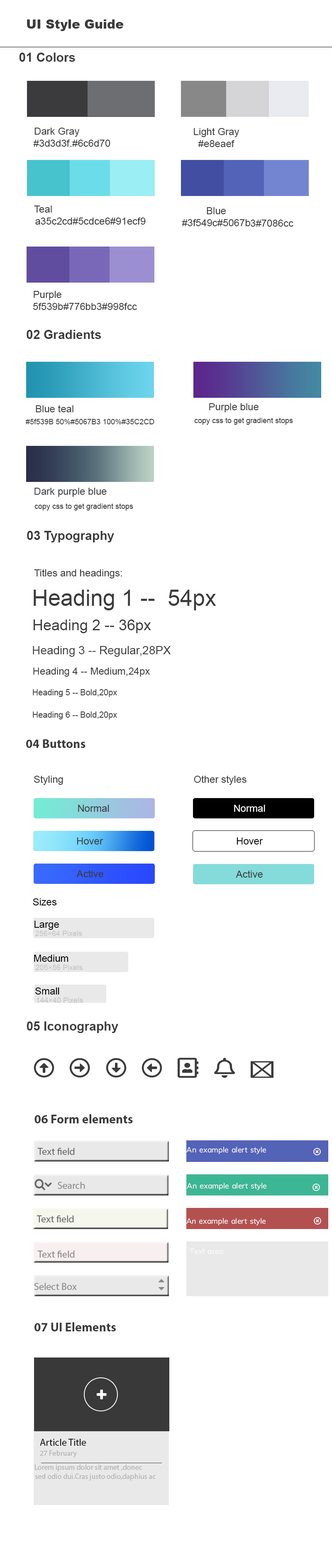
<style>
.page{position:relative;width:332px;height:1568px;background:#ffffff}
.page>*{position:absolute;margin:0}
.t1{font:12.4px "Arial-Black";color:#3b3b3d}
.t2{font:9.9px "ArialMT";color:#3b3b3d}
.t3{font:12.4px "Arial-BoldMT";color:#3b3b3d}
.t4{font:7.5px "ArialMT";color:#3b3b3d}
.t5{font:22.4px "ArialMT";color:#3b3b3d}
.t6{font:14.9px "ArialMT";color:#3b3b3d}
.t7{font:11.6px "ArialMT";color:#3b3b3d}
.t8{font:8.3px "ArialMT";color:#3b3b3d}
.t9{font:12.4px "MyriadPro-Bold";color:#3b3b3d}
.t10{font:12.4px "FontAwesome5Free-Regular";color:#3b3b3d}
.t11{font:9.9px "ArialMT";color:#ffffff}
.t12{font:9.9px "ArialMT";color:#000000}
.t13{font:7.5px "ArialMT";color:#c5c5c5}
.t14{font:9.9px "ArialMT";color:#c5c5c5}
.t15{font:12.4px "MyriadPro-Regular";color:#3b3b3d}
.t16{font:9.9px "MyriadPro-Regular";color:#686666}
.t17{font:9.9px "MyriadPro-Regular";color:#8b8989}
.t18{font:9.9px "MyriadPro-Regular";color:#181818}
.t19{font:7.5px "MyriadPro-Regular";color:#b5b1b1}
.t20{font:9.9px "MyriadPro-Regular";color:#b5b1b1}
</style>
<div class="page">
<p class="t1" style="left:27px;top:19px;width:96px;height:12px"><span class="t2">                       </span>UI Style Guide</p>
<p class="t3" style="left:19px;top:53px;width:56px;height:9px">01 Colors</p>
<p class="t2" style="left:33px;top:128px;width:77px;height:19px;text-align:center">Dark Gray<br>                            #3d3d3f.#6c6d70</p>
<p class="t2" style="left:194px;top:128px;width:45px;height:19px;text-align:center">Light Gray<br>#e8eaef</p>
<p class="t2" style="left:34px;top:206px;width:111px;height:19px;text-align:center">Teal<br>                                         a35c2cd#5cdce6#91ecf9</p>
<p class="t2" style="left:181px;top:207px;width:69px;height:19px;text-align:center">Blue<br>#3f549c#5067b</p>
<p class="t2" style="left:250px;top:220px;width:43px;height:7px">3#7086cc</p>
<p class="t2" style="left:33px;top:291px;width:104px;height:19px;text-align:center">Purple<br>                                     5f539b#776bb3#998fcc</p>
<p class="t3" style="left:27px;top:330px;width:74px;height:9px"><span class="t2">                     </span>02 Gradients</p>
<p class="t2" style="left:209px;top:403px;width:49px;height:9px"><span class="t3">                   </span>Purple blue</p>
<p class="t4" style="left:194px;top:418px;width:99px;height:7px">copy css to get gradient stops</p>
<p class="t2" style="left:34px;top:488px;width:72px;height:9px"><span class="t4">                               </span>Dark purple blue</p>
<p class="t4" style="left:34px;top:503px;width:99px;height:8px">copy css to get gradient stops</p>
<p class="t3" style="left:27px;top:531px;width:87px;height:11px"><span class="t2">                                </span>03 Typography</p>
<p class="t2" style="left:34px;top:569px;width:88px;height:9px">Titles and headings:</p>
<p class="t5" style="left:34px;top:590px;width:182px;height:20px"><span class="t2">                          </span>Heading 1 --  54px</p>
<p class="t6" style="left:34px;top:619px;width:117px;height:14px">Heading 2 -- 36px</p>
<p class="t7" style="left:33px;top:646px;width:138px;height:11px">Heading 3 -- Regular,28PX</p>
<p class="t2" style="left:33px;top:668px;width:117px;height:9px">Heading 4 -- Medium,24px</p>
<p class="t8" style="left:33px;top:689px;width:84px;height:8px">Heading 5 -- Bold,20px</p>
<p class="t8" style="left:33px;top:711px;width:84px;height:8px">Heading 6 -- Bold,20px</p>
<p class="t9" style="left:26px;top:739px;width:59px;height:9px"><span class="t10">            </span>04 Buttons</p>
<p class="t2" style="left:34px;top:775px;width:29px;height:10px">Styling</p>
<p class="t2" style="left:194px;top:775px;width:52px;height:10px">Other styles</p>
<p class="t2" style="left:78px;top:805px;width:31px;height:7px">Normal</p>
<p class="t11" style="left:234px;top:805px;width:31px;height:7px">Normal</p>
<p class="t2" style="left:77px;top:837px;width:26px;height:7px">Hover</p>
<p class="t12" style="left:236px;top:837px;width:27px;height:7px">Hover</p>
<p class="t2" style="left:76px;top:870px;width:27px;height:7px">Active</p>
<p class="t2" style="left:235px;top:870px;width:27px;height:8px">Active</p>
<p class="t12" style="left:33px;top:898px;width:24px;height:7px">Sizes</p>
<p class="t12" style="left:34px;top:921px;width:25px;height:9px">Large</p>
<p class="t13" style="left:35px;top:931px;width:47px;height:5px"><span class="t14">       </span>256×64 Pixels</p>
<p class="t12" style="left:34px;top:955px;width:34px;height:7px">Medium</p>
<p class="t13" style="left:36px;top:965px;width:46px;height:5px"><span class="t14">       </span>205×56 Pixels</p>
<p class="t12" style="left:35px;top:987px;width:24px;height:8px">Small</p>
<p class="t13" style="left:36px;top:997px;width:47px;height:6px"><span class="t14">       </span>144×40 Pixels</p>
<p class="t3" style="left:27px;top:1021px;width:91px;height:12px"><span class="t2">                            </span>05 Iconography</p>
<p class="t9" style="left:34px;top:1114px;width:99px;height:9px"><span class="t15">                                    </span>06 Form elements</p>
<p class="t16" style="left:37px;top:1148px;width:38px;height:7px">Text field</p>
<p class="t17" style="left:58px;top:1182px;width:27px;height:7px">Search</p>
<p class="t16" style="left:36px;top:1215px;width:38px;height:7px">Text field</p>
<p class="t17" style="left:37px;top:1251px;width:38px;height:7px">Text field</p>
<p class="t17" style="left:34px;top:1283px;width:43px;height:7px">Select Box</p>
<p class="t9" style="left:34px;top:1322px;width:82px;height:9px">07 UI Elements</p>
<p class="t18" style="left:40px;top:1439px;width:46px;height:7px">Article Title</p>
<p class="t19" style="left:40px;top:1450px;width:37px;height:7px"><span class="t20">                       </span>27 February</p>
<p class="t19" style="left:35px;top:1464px;width:120px;height:17px;text-align:center">Lorem ipsum dolor sit amet ,donec<br>              sed odio dui.Cras justo odio,daphius ac</p>
</div>
